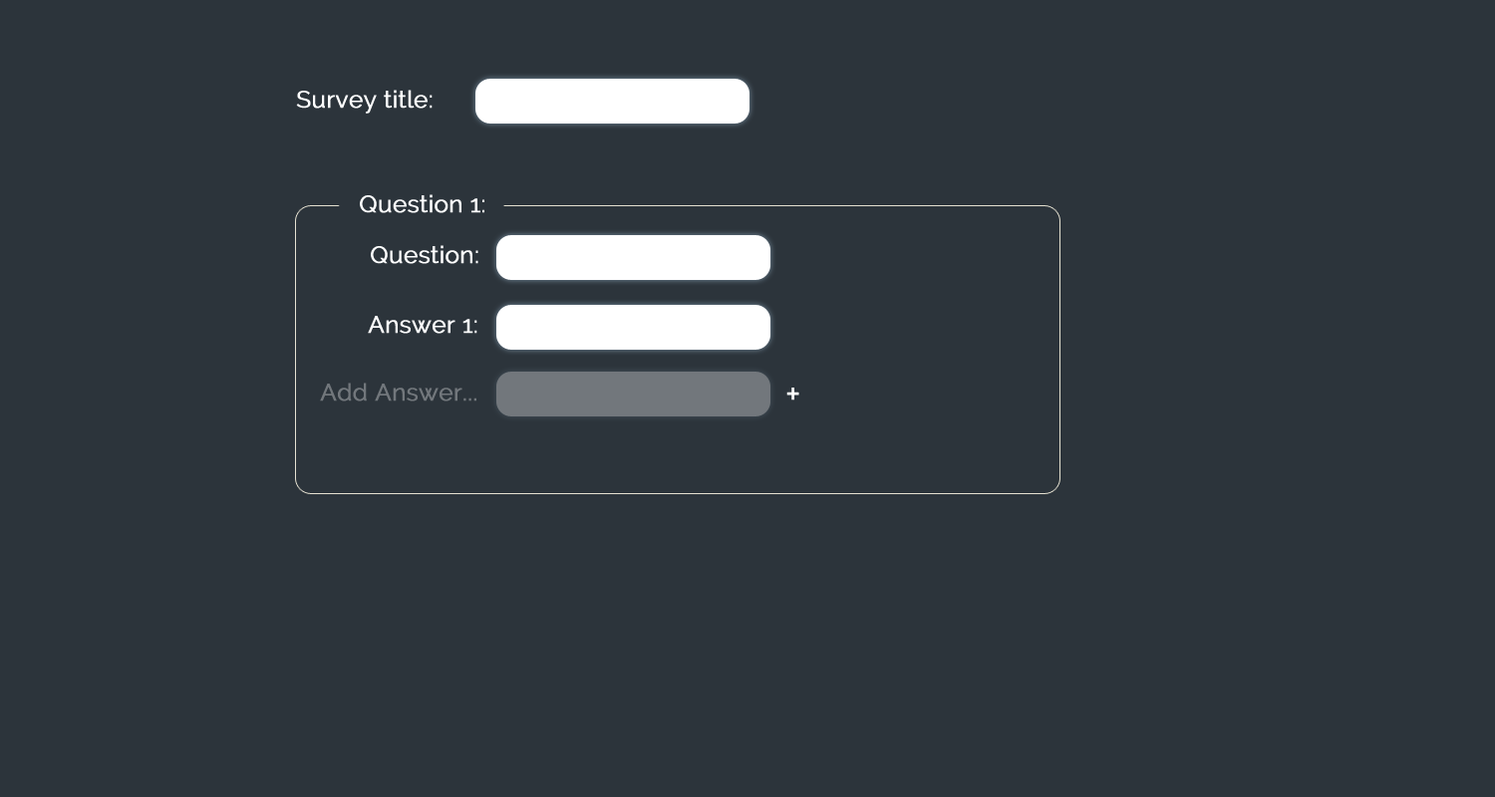
<style>
.page{position:relative;width:1495px;height:797px;background:#2c343b}
.page>*{position:absolute;margin:0}
.t1{font:23.9px "Raleway";color:#ffffff;font-weight:bold}
.t2{font:23.9px "Raleway";color:#72777c;font-weight:bold}
.t3{font:35.9px "Raleway";color:#ffffff;font-weight:bold}
</style>
<div class="page">
<p class="t1" style="left:296px;top:90px;width:137px;height:24px">Survey title:</p>
<p class="t1" style="left:360px;top:194px;width:124px;height:19px">Question 1:</p>
<p class="t1" style="left:371px;top:245px;width:107px;height:19px">Question:</p>
<p class="t1" style="left:368px;top:316px;width:109px;height:18px">Answer 1:</p>
<p class="t2" style="left:320px;top:383px;width:156px;height:19px">Add Answer...</p>
<p class="t3" style="left:787px;top:388px;width:12px;height:13px">+</p>
</div>
